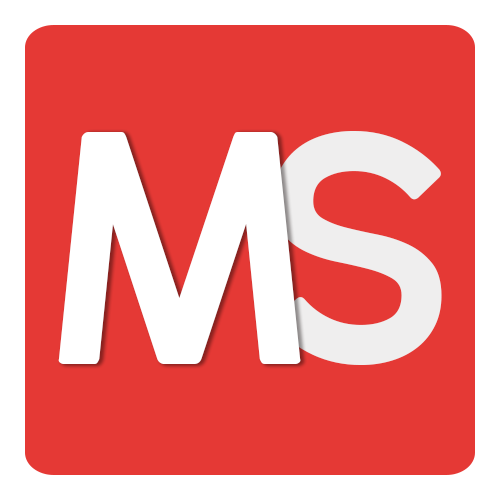
<style>
.page{position:relative;width:500px;height:500px;background:#e53935}
.page>*{position:absolute;margin:0}
.t1{font:415.5px "perfectlyamicable";color:#ffffff}
.t2{font:415.5px "perfectlyamicable";color:#efeeee}
</style>
<div class="page">
<p class="t1" style="left:58px;top:132px;width:243px;height:232px">M</p>
<p class="t2" style="left:272px;top:131px;width:170px;height:234px">S</p>
</div>
